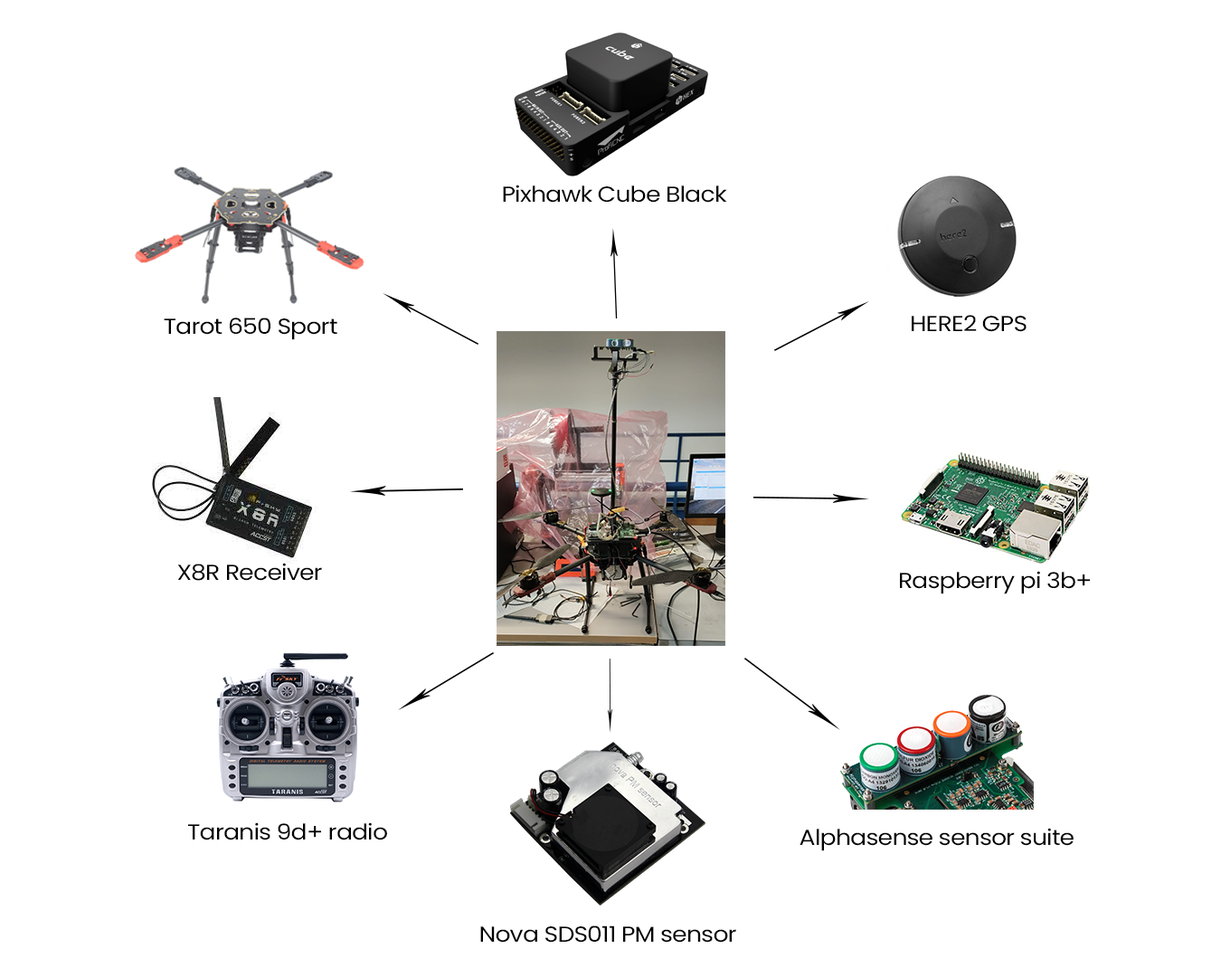
<style>
.page{position:relative;width:1221px;height:977px;background:#ffffff}
.page>*{position:absolute;margin:0}
.t1{font:21.7px "Poppins-Regular";letter-spacing:-0.03em;color:#000000;scale:1.11 1}
</style>
<div class="page">
<p class="t1" style="left:503px;top:184px;width:224px;height:19px">Pixhawk Cube Black</p>
<p class="t1" style="left:164px;top:317px;width:173px;height:23px">Tarot 650 Sport</p>
<p class="t1" style="left:912px;top:315px;width:114px;height:17px">HERE2 GPS</p>
<p class="t1" style="left:177px;top:563px;width:145px;height:18px">X8R Receiver</p>
<p class="t1" style="left:900px;top:571px;width:190px;height:23px">Raspberry pi 3b+</p>
<p class="t1" style="left:188px;top:822px;width:199px;height:18px">Taranis 9d+ radio</p>
<p class="t1" style="left:799px;top:827px;width:274px;height:24px">Alphasense sensor suite</p>
<p class="t1" style="left:480px;top:925px;width:256px;height:17px">Nova SDS011 PM sensor</p>
</div>
